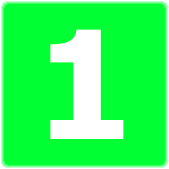
<style>
.page{position:relative;width:169px;height:169px;background:#00ff33}
.page>*{position:absolute;margin:0}
.t1{font:150px "Verdana-Bold";color:#ffffff;text-transform:uppercase}
</style>
<div class="page">
<p class="t1" style="left:50px;top:29px;width:74px;height:110px">1</p>
</div>
